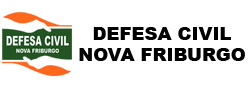
<style>
.page{position:relative;width:250px;height:88px;background:#ffffff}
.page>*{position:absolute;margin:0}
.t1{font:18px "Arial-Black";color:#000000}
</style>
<div class="page">
<p class="t1" style="left:79px;top:27px;width:166px;height:34px;text-align:center">DEFESA CIVIL<br>NOVA FRIBURGO</p>
</div>
